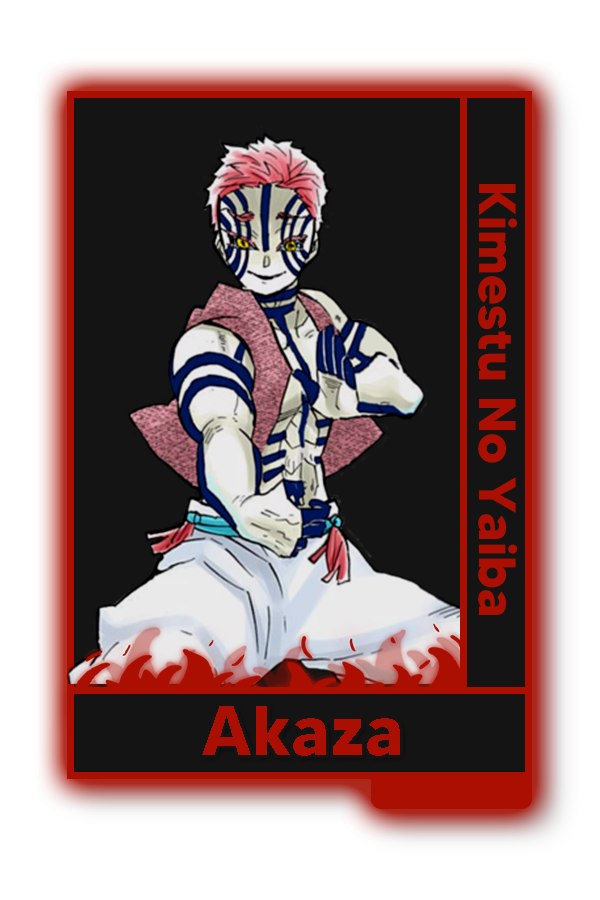
<style>
.page{position:relative;width:600px;height:900px;background:#141414}
.page>*{position:absolute;margin:0}
.t1{font:52px "MADETOMMY-Bold";color:#ab0f01}
.t2{font:70.1px "MADETOMMY-Bold";color:#ab0f01}
</style>
<div class="page">
<p class="t1" style="left:478px;top:184px;width:40px;height:431px;rotate:90deg">Kimestu No Yaiba</p>
<p class="t2" style="left:202px;top:706px;width:198px;height:50px">Akaza</p>
</div>
